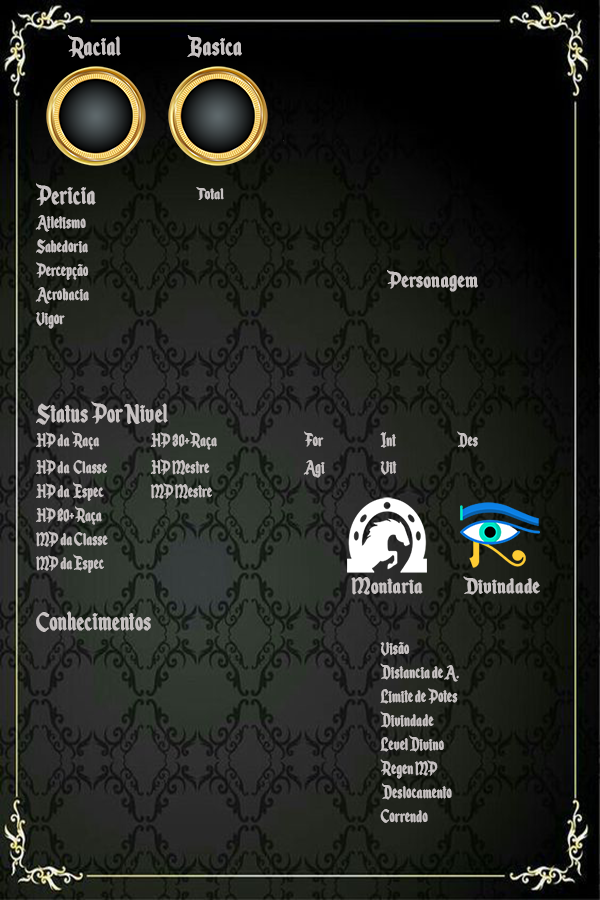
<style>
.page{position:relative;width:600px;height:900px}
.page>*{position:absolute;margin:0}
.t1{font:20px "EnchantedLand";color:#c6c1c1;font-weight:bold;scale:0.86 1}
.t2{font:31px "EnchantedLand";color:#c6c1c1;font-weight:bold;scale:0.86 1}
.t3{font:18px "EnchantedLand";color:#c6c1c1;font-weight:bold}
.t4{font:25px "EnchantedLand";color:#c6c1c1;font-weight:bold}
</style>
<div class="page">
<p class="t1" style="left:35px;top:35px;width:443px;height:788px"><span class="t2">          Racial                    Basica          <br>      <br><br><br>Pericia</span>       <br>Atletismo  <br>Sabedoria <br>Percepção<br>Acrobacia <br>Vigor<br><br><br><span class="t2">Status Por Nivel<br></span>HP da  Raça  HP 30+ Raça   For  Int  Des<br>HP da  Classe  HP Mestre   Agi  Vit   <br>HP da  Espec  MP Mestre  <br>HP 20+ Raça                 <br>MP da Classe        <br>MP da Espec<br>            <br><span class="t2">Conhecimentos<br></span>         Visão<br>         Distancia de A.<br>         Limite de Potes<br>         Divindade <br>         Level Divino<br>         Regen MP<br>          Deslocamento<br>         Correndo</p>
<p class="t3" style="left:196px;top:187px;width:28px;height:13px">Total</p>
<p class="t4" style="left:387px;top:270px;width:91px;height:22px">Personagem</p>
<p class="t4" style="left:351px;top:576px;width:189px;height:19px">Montaria             Divindade</p>
</div>
